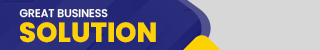
<style>
.page{position:relative;width:320px;height:50px;background:#d7d7d7}
.page>*{position:absolute;margin:0}
.t1{font:11px "Poppins-Medium";color:#ffffff}
.t2{font:27.5px "Poppins-ExtraBold";color:#fed202}
</style>
<div class="page">
<p class="t1" style="left:19px;top:9px;width:89px;height:9px">GREAT BUSINESS</p>
<p class="t2" style="left:20px;top:22px;width:136px;height:21px">SOLUTION</p>
</div>
